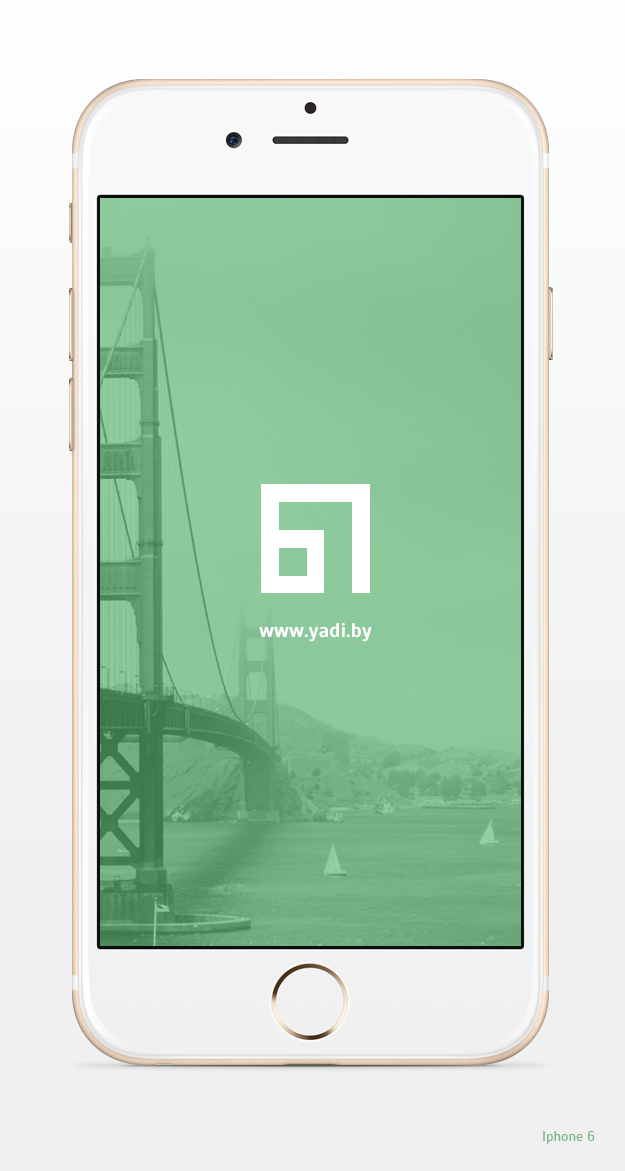
<style>
.page{position:relative;width:625px;height:1171px}
.page>*{position:absolute;margin:0}
.t1{font:20px "Scada-Bold";color:#ffffff}
.t2{font:14px "Scada-Regular";color:#79b689}
</style>
<div class="page">
<p class="t1" style="left:259px;top:622px;width:113px;height:20px">www.yadi.by</p>
<p class="t2" style="left:543px;top:1130px;width:52px;height:14px">Iphone 6</p>
</div>
